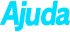
<style>
.page{position:relative;width:70px;height:32px;background:#ffffff}
.page>*{position:absolute;margin:0}
.t1{font:30.7px "RodinPro-EB";letter-spacing:-0.067em;color:#00dcfe;font-style:italic;scale:0.83 1}
</style>
<div class="page">
<p class="t1" style="left:0px;top:0px;width:71px;height:32px">Ajuda</p>
</div>
